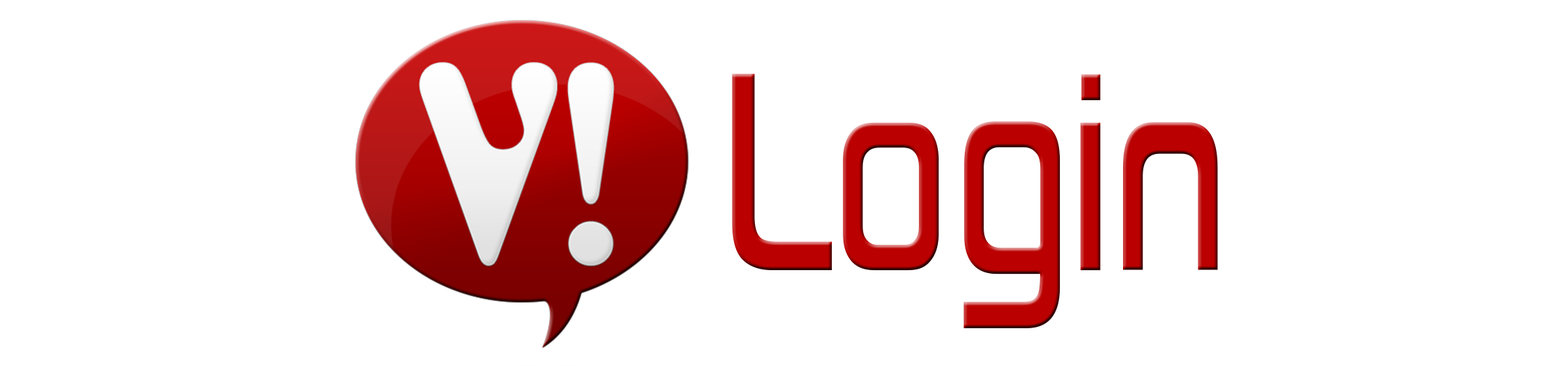
<style>
.page{position:relative;width:1568px;height:366px;background:#ffffff}
.page>*{position:absolute;margin:0}
.t1{font:401.4px "SonySketchEF";color:#ba0000;scale:0.57 1}
</style>
<div class="page">
<p class="t1" style="left:732px;top:73px;width:486px;height:255px">Login</p>
</div>
